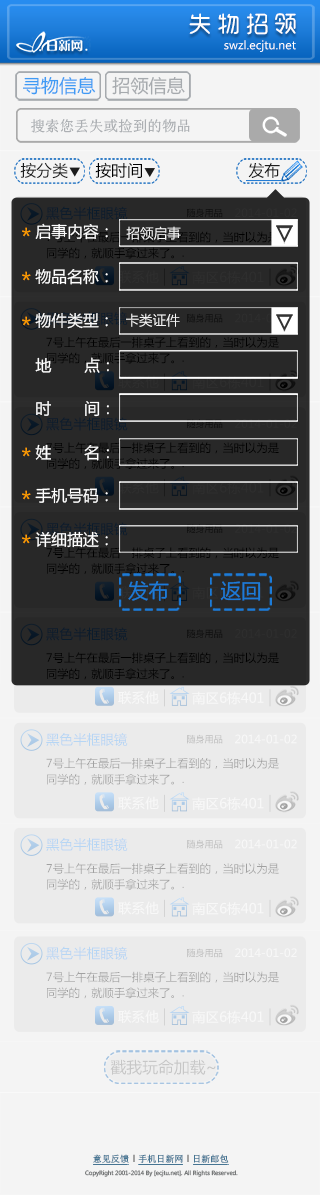
<style>
.page{position:relative;width:320px;height:1195px;background:#f4f4f4}
.page>*{position:absolute;margin:0}
.t1{font:22.6px "RTWSYueRoudGoDemo-Regular";color:#ffffff}
.t2{font:11.3px "MicrosoftYaHei";color:#ffffff}
.t3{font:18.1px "MicrosoftYaHei";color:#3f9bf4}
.t4{font:18.1px "MicrosoftYaHei";color:#a6aaae}
.t5{font:14.6px "SimSun";color:#a6aaae}
.t6{font:15.9px "MicrosoftYaHei";color:#1d1d1d}
.t7{font:15.9px "MicrosoftYaHei";color:#010101}
.t8{font:13.6px "MicrosoftYaHei";color:#0b1c2c}
.t9{font:9.1px "MicrosoftYaHei"}
.t10{font:22.6px "MicrosoftYaHei";color:#ff9c00}
.t11{font:15.9px "MicrosoftYaHei";color:#ffffff}
.t12{font:13.6px "MicrosoftYaHei";color:#f6f6f6}
.t13{font:13.6px "MicrosoftYaHei";color:#2e2e2e}
.t14{font:20.4px "MicrosoftYaHei";color:#1c7bd8}
.t15{font:11.3px/15.9px "MicrosoftYaHei";color:#000000}
.t16{font:11.3px "NSimSun";color:#000000}
.t17{font:13.6px "MicrosoftYaHei";color:#ffffff}
.t18{font:13.6px "MicrosoftYaHei";color:#b6d6f4}
.t19{font:11.3px/15.9px "MicrosoftYaHei";color:#a1a1a1}
.t20{font:11.3px "NSimSun";color:#a1a1a1}
.t21{font:15.9px "MicrosoftYaHei";color:#c7c7c7}
.t22{font:9.1px "SimSun";color:#467593}
.t23{font:5.7px "MicrosoftYaHei";color:#787a7b}
</style>
<div class="page">
<p class="t1" style="left:189px;top:13px;width:107px;height:22px">失 物 招 领</p>
<p class="t2" style="left:224px;top:40px;width:72px;height:12px">swzl.ecjtu.net</p>
<p class="t3" style="left:23px;top:76px;width:73px;height:19px">寻物信息</p>
<p class="t4" style="left:112px;top:76px;width:73px;height:19px">招领信息</p>
<p class="t5" style="left:31px;top:119px;width:159px;height:14px">搜索您丢失或捡到的物品</p>
<p class="t6" style="left:20px;top:162px;width:48px;height:17px">按分类</p>
<p class="t7" style="left:95px;top:162px;width:47px;height:16px">按时间</p>
<p class="t6" style="left:248px;top:162px;width:32px;height:16px">发布</p>
<p class="t8" style="left:46px;top:206px;width:82px;height:14px">黑色半框眼镜</p>
<p class="t9" style="left:187px;top:208px;width:36px;height:10px">随身用品</p>
<p class="t10" style="left:22px;top:227px;width:9px;height:10px">*</p>
<p class="t11" style="left:35px;top:223px;width:73px;height:17px">启事内容：</p>
<p class="t12" style="left:126px;top:226px;width:55px;height:14px">招领启事</p>
<p class="t11" style="left:35px;top:269px;width:73px;height:16px">物品名称：</p>
<p class="t13" style="left:192px;top:270px;width:72px;height:14px">南区6栋401</p>
<p class="t10" style="left:22px;top:271px;width:9px;height:10px">*</p>
<p class="t10" style="left:22px;top:316px;width:9px;height:10px">*</p>
<p class="t11" style="left:35px;top:313px;width:73px;height:16px">物件类型：</p>
<p class="t12" style="left:126px;top:313px;width:54px;height:14px">卡类证件</p>
<p class="t9" style="left:187px;top:313px;width:36px;height:10px">随身用品</p>
<p class="t11" style="left:35px;top:357px;width:74px;height:16px">地       点：</p>
<p class="t11" style="left:36px;top:401px;width:73px;height:16px">时       间：</p>
<p class="t10" style="left:22px;top:447px;width:9px;height:10px">*</p>
<p class="t11" style="left:35px;top:444px;width:74px;height:17px">姓       名：</p>
<p class="t10" style="left:22px;top:490px;width:9px;height:10px">*</p>
<p class="t11" style="left:35px;top:487px;width:73px;height:17px">手机号码：</p>
<p class="t10" style="left:22px;top:534px;width:9px;height:10px">*</p>
<p class="t11" style="left:35px;top:531px;width:73px;height:17px">详细描述：</p>
<p class="t14" style="left:128px;top:580px;width:41px;height:21px">发布</p>
<p class="t14" style="left:220px;top:581px;width:41px;height:20px">返回</p>
<p class="t8" style="left:46px;top:627px;width:82px;height:14px">黑色半框眼镜</p>
<p class="t9" style="left:187px;top:629px;width:36px;height:9px">随身用品</p>
<p class="t15" style="left:46px;top:652px;width:233px;height:28px">7号上午在最后一排桌子上看到的，当时以为是<br>同学的，就顺手拿过来了。<span class="t16">.</span></p>
<p class="t17" style="left:118px;top:691px;width:41px;height:13px">联系他</p>
<p class="t17" style="left:192px;top:691px;width:72px;height:14px">南区6栋401</p>
<p class="t18" style="left:46px;top:733px;width:82px;height:13px">黑色半框眼镜</p>
<p class="t9" style="left:187px;top:734px;width:36px;height:10px">随身用品</p>
<p class="t2" style="left:235px;top:734px;width:62px;height:10px">2014-01-02</p>
<p class="t19" style="left:46px;top:757px;width:233px;height:28px">7号上午在最后一排桌子上看到的，当时以为是<br>同学的，就顺手拿过来了。<span class="t20">.</span></p>
<p class="t17" style="left:118px;top:796px;width:41px;height:14px">联系他</p>
<p class="t17" style="left:192px;top:797px;width:72px;height:13px">南区6栋401</p>
<p class="t18" style="left:46px;top:838px;width:82px;height:13px">黑色半框眼镜</p>
<p class="t9" style="left:187px;top:839px;width:36px;height:10px">随身用品</p>
<p class="t2" style="left:235px;top:839px;width:62px;height:10px">2014-01-02</p>
<p class="t19" style="left:46px;top:863px;width:233px;height:27px">7号上午在最后一排桌子上看到的，当时以为是<br>同学的，就顺手拿过来了。<span class="t20">.</span></p>
<p class="t17" style="left:118px;top:901px;width:41px;height:14px">联系他</p>
<p class="t17" style="left:192px;top:902px;width:72px;height:13px">南区6栋401</p>
<p class="t18" style="left:46px;top:946px;width:82px;height:14px">黑色半框眼镜</p>
<p class="t9" style="left:187px;top:948px;width:36px;height:10px">随身用品</p>
<p class="t2" style="left:235px;top:948px;width:62px;height:10px">2014-01-02</p>
<p class="t19" style="left:46px;top:971px;width:233px;height:28px">7号上午在最后一排桌子上看到的，当时以为是<br>同学的，就顺手拿过来了。<span class="t20">.</span></p>
<p class="t17" style="left:118px;top:1010px;width:41px;height:13px">联系他</p>
<p class="t17" style="left:192px;top:1010px;width:72px;height:14px">南区6栋401</p>
<p class="t21" style="left:110px;top:1059px;width:106px;height:16px">戳我玩命加载~</p>
<p class="t22" style="left:93px;top:1154px;width:36px;height:10px">意见反馈</p>
<p class="t9" style="left:133px;top:1154px;width:2px;height:8px">l</p>
<p class="t22" style="left:138px;top:1154px;width:45px;height:9px">手机日新网</p>
<p class="t9" style="left:187px;top:1154px;width:2px;height:8px">l</p>
<p class="t22" style="left:194px;top:1154px;width:35px;height:9px">日新邮包</p>
<p class="t23" style="left:85px;top:1170px;width:153px;height:7px">CopyRight 2001-2014 By [ecjtu.net]. All Rights Reserved.</p>
</div>
